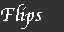
<style>
.page{position:relative;width:64px;height:32px;background:#333333}
.page>*{position:absolute;margin:0}
.t1{font:19.9px "Apple-Chancery";color:#ffffff}
</style>
<div class="page">
<p class="t1" style="left:1px;top:4px;width:41px;height:25px">Flips</p>
</div>
